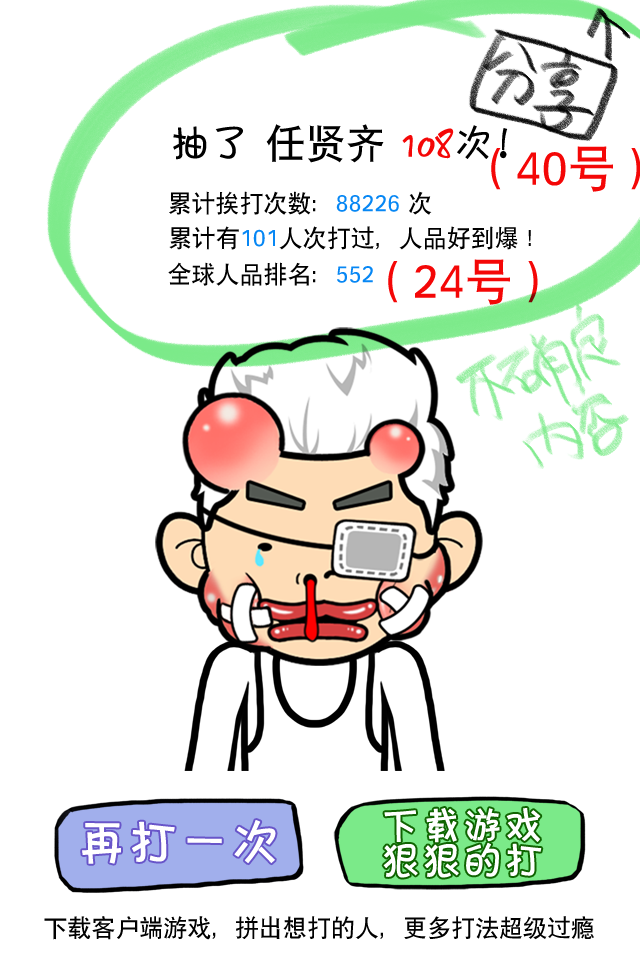
<style>
.page{position:relative;width:640px;height:960px;background:#ffffff}
.page>*{position:absolute;margin:0}
.t1{font:40px "SIL-Hei-Med-Jian";color:#000000}
.t2{font:40px "FZKATJW--GB1-0";color:#000000}
.t3{font:40px "FZKATJW--GB1-0";color:#f40707}
.t4{font:48.4px "SIL-Hei-Med-Jian";color:#f40707}
.t5{font:24px "SIL-Hei-Med-Jian";color:#000000}
.t6{font:24px "SIL-Hei-Med-Jian";color:#0787f4}
.t7{font:40px/35.1px "FZKATJW--GB1-0";color:#ffffff;font-weight:bold}
.t8{font:50px "FZKATFW--GB1-0";color:#ffffff;font-weight:bold}
</style>
<div class="page">
<p class="t1" style="left:173px;top:124px;width:335px;height:39px"><span class="t2">抽了  </span>任贤齐 <span class="t3">108</span><span class="t2">次！</span></p>
<p class="t4" style="left:491px;top:146px;width:150px;height:46px">（40号）</p>
<p class="t5" style="left:169px;top:191px;width:263px;height:24px">累计挨打次数：<span class="t6">88226 </span>次</p>
<p class="t5" style="left:169px;top:226px;width:362px;height:24px">累计有<span class="t6">101</span>人次打过，人品好到爆！</p>
<p class="t5" style="left:168px;top:262px;width:205px;height:24px">全球人品排名：<span class="t6">552</span></p>
<p class="t4" style="left:388px;top:259px;width:150px;height:46px">（24号）</p>
<p class="t7" style="left:383px;top:808px;width:159px;height:70px">下载游戏<br>狠狠的打</p>
<p class="t8" style="left:82px;top:820px;width:194px;height:44px">再打一次</p>
<p class="t5" style="left:44px;top:916px;width:550px;height:24px">下载客户端游戏，拼出想打的人，更多打法超级过瘾</p>
</div>
